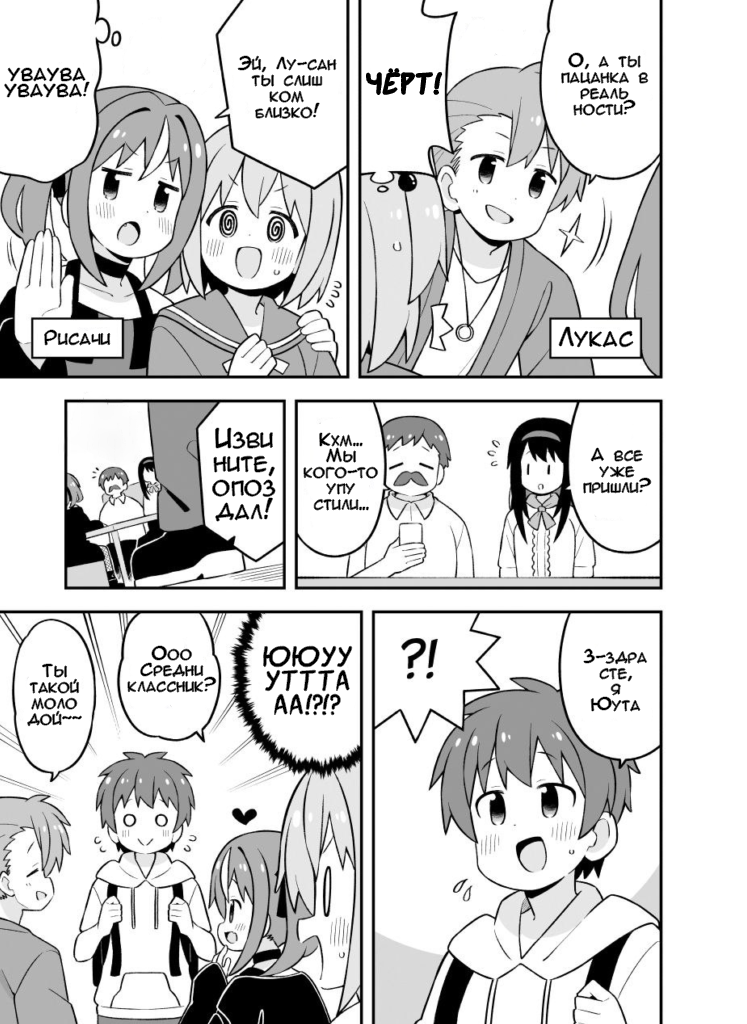
<style>
.page{position:relative;width:747px;height:1024px;background:#ffffff}
.page>*{position:absolute;margin:0}
.t1{font:16px/16px "AnimeAcev3";color:#000000}
.t2{font:30px "SuperWebcomicBros.Rusbyyakustick";color:#000000}
.t3{font:24px "AnimeAcev3";color:#000000}
.t4{font:18px "AnimeAcev3";color:#000000}
.t5{font:24px/24px "AnimeAcev3";color:#000000}
.t6{font:30px/24px "SuperWebcomicBros.Rusbyyakustick";color:#000000}
</style>
<div class="page">
<p class="t1" style="left:561px;top:53px;width:87px;height:63px;text-align:center">О, а ты<br>пацанка в<br>реаль<br>ности?</p>
<p class="t1" style="left:238px;top:56px;width:99px;height:63px;text-align:center">Эй, Лу-сан<br>ты слиш<br>ком<br>близко!</p>
<p class="t1" style="left:4px;top:68px;width:86px;height:29px;text-align:center">УВАУВА<br>УВАУВА!</p>
<p class="t2" style="left:367px;top:69px;width:75px;height:25px">ЧЁРТ!</p>
<p class="t3" style="left:559px;top:327px;width:74px;height:20px">Лукас</p>
<p class="t4" style="left:44px;top:330px;width:66px;height:16px">Рисачи</p>
<p class="t5" style="left:212px;top:428px;width:64px;height:94px;text-align:center">Изви<br>ните,<br>опоз<br>дал!</p>
<p class="t1" style="left:303px;top:433px;width:75px;height:78px;text-align:center">Кхм...<br>Мы<br>кого-то<br>упу<br>стили...</p>
<p class="t1" style="left:583px;top:448px;width:68px;height:46px;text-align:center">А все<br>уже<br>пришли?</p>
<p class="t1" style="left:127px;top:646px;width:89px;height:47px;text-align:center">Ооо<br>Средни<br>классник?</p>
<p class="t6" style="left:263px;top:646px;width:89px;height:69px;text-align:center">ЮЮУУ<br>УТТТА<br>АА!?!?</p>
<p class="t1" style="left:583px;top:649px;width:64px;height:63px;text-align:center">З-здра<br>сте,<br>я<br>Юута</p>
<p class="t1" style="left:27px;top:664px;width:55px;height:62px;text-align:center">Ты<br>такой<br>моло<br>дой~~</p>
</div>
